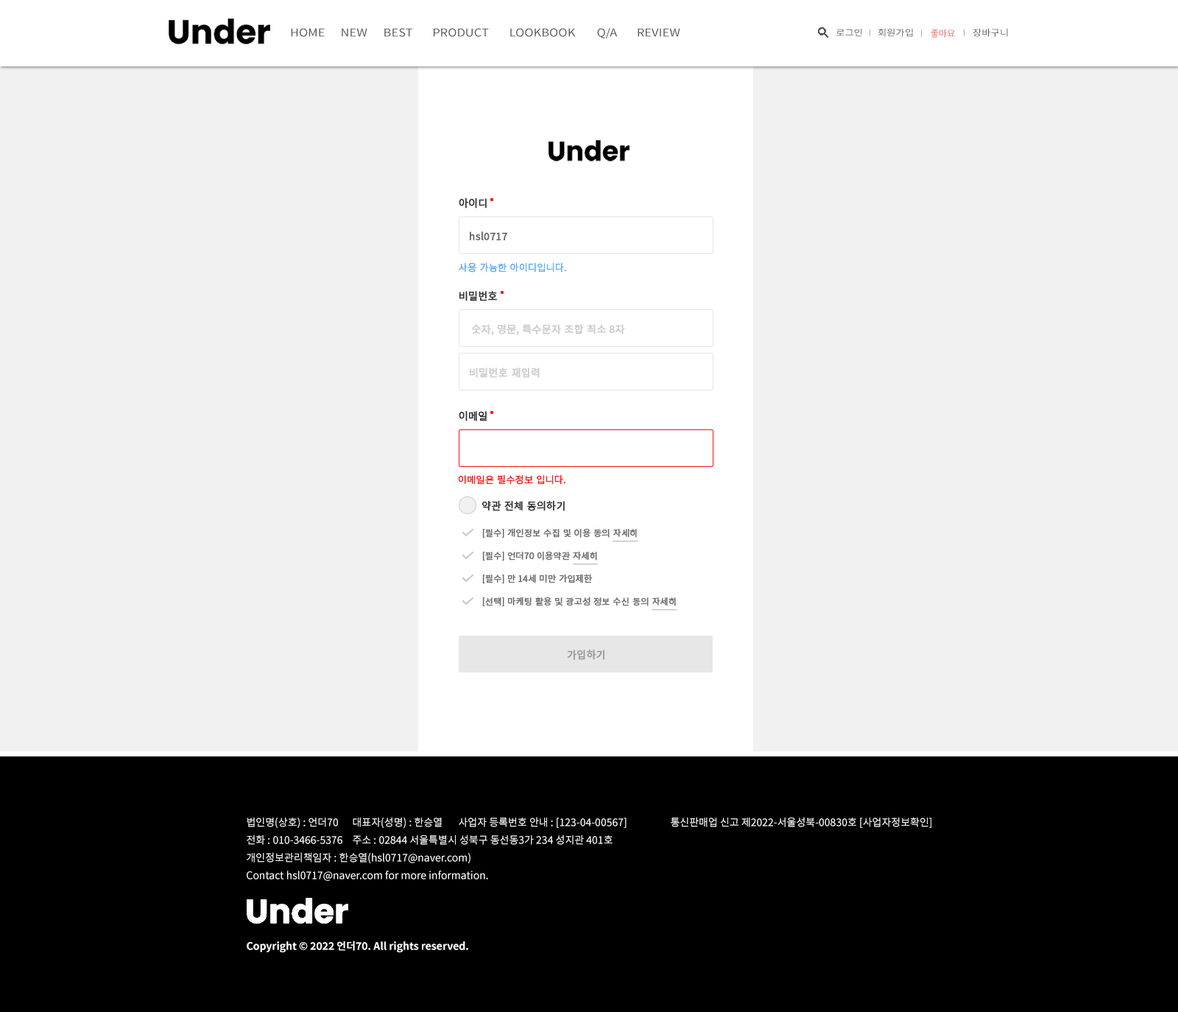
<style>
.page{position:relative;width:1178px;height:1012px;background:#f1f1f1}
.page>*{position:absolute;margin:0}
.t1{font:10.7px "NotoSansKR-Regular";color:#555555;scale:1.14 1}
.t2{font:8.8px "NotoSansKR-Regular";color:#555555;scale:1.11 1}
.t3{font:8.8px "NotoSansKR-Regular";color:#f85656}
.t4{font:10.3px "NotoSansKR-Regular";color:#333333;font-weight:bold}
.t5{font:10.3px "NotoSansKR-Regular";color:#666666;font-weight:bold}
.t6{font:9.6px "NotoSansKR-Light";color:#60aaff;font-weight:bold}
.t7{font:10.3px "NotoSansKR-Regular";color:#cccccc;font-weight:bold}
.t8{font:9.6px "NotoSansKR-Light";color:#ff1010;font-weight:bold}
.t9{font:8.8px "NotoSansKR-Regular";color:#6e6e6e;font-weight:bold}
.t10{font:8.8px "NotoSansKR-Regular";color:#6e6e6e;font-weight:bold;text-decoration:underline}
.t11{font:10.3px "NotoSansKR-Regular";color:#999999;font-weight:bold}
.t12{font:10.3px/17.7px "NotoSansKR-Regular";color:#ffffff}
.t13{font:10.3px/17.7px "NotoSansKR-Bold";color:#ffffff}
</style>
<div class="page">
<p class="t1" style="left:291px;top:28px;width:34px;height:9px">HOME</p>
<p class="t1" style="left:342px;top:28px;width:26px;height:9px">NEW</p>
<p class="t1" style="left:384px;top:28px;width:29px;height:9px">BEST</p>
<p class="t1" style="left:434px;top:28px;width:55px;height:9px">PRODUCT</p>
<p class="t1" style="left:510px;top:28px;width:66px;height:9px">LOOKBOOK</p>
<p class="t1" style="left:597px;top:28px;width:21px;height:11px">Q/A</p>
<p class="t1" style="left:638px;top:28px;width:43px;height:9px">REVIEW</p>
<p class="t2" style="left:837px;top:29px;width:25px;height:8px">로그인</p>
<p class="t2" style="left:878px;top:28px;width:35px;height:9px">회원가입</p>
<p class="t3" style="left:931px;top:29px;width:24px;height:9px">좋아요</p>
<p class="t2" style="left:973px;top:28px;width:35px;height:9px">장바구니</p>
<p class="t4" style="left:459px;top:198px;width:28px;height:10px">아이디</p>
<p class="t5" style="left:470px;top:231px;width:37px;height:10px">hsl0717</p>
<p class="t6" style="left:459px;top:262px;width:107px;height:10px">사용 가능한 아이디입니다.</p>
<p class="t4" style="left:460px;top:291px;width:37px;height:10px">비밀번호</p>
<p class="t7" style="left:471px;top:324px;width:154px;height:11px">숫자, 영문, 특수문자 조합 최소 8자</p>
<p class="t7" style="left:470px;top:368px;width:70px;height:10px">비밀번호 재입력</p>
<p class="t4" style="left:459px;top:411px;width:29px;height:10px">이메일</p>
<p class="t8" style="left:458px;top:475px;width:108px;height:10px">이메일은 필수정보 입니다.</p>
<p class="t4" style="left:482px;top:501px;width:83px;height:10px">약관 전체 동의하기</p>
<p class="t9" style="left:482px;top:528px;width:157px;height:14px">[필수] 개인정보 수집 및 이용 동의 <span class="t10">자세히</span></p>
<p class="t9" style="left:482px;top:551px;width:116px;height:14px">[필수] 언더70 이용약관 <span class="t10">자세히</span></p>
<p class="t9" style="left:482px;top:574px;width:111px;height:10px">[필수] 만 14세 미만 가입제한</p>
<p class="t9" style="left:482px;top:597px;width:196px;height:14px">[선택] 마케팅 활용 및 광고성 정보 수신 동의 <span class="t10">자세히</span></p>
<p class="t11" style="left:567px;top:650px;width:38px;height:10px">가입하기</p>
<p class="t12" style="left:247px;top:817px;width:685px;height:135px">법인명(상호) : 언더70 대표자(성명) : 한승열 사업자 등록번호 안내 : [123-04-00567]  통신판매업 신고 제2022-서울성북-00830호 [사업자정보확인]<br>전화 : 010-3466-5376 주소 : 02844 서울특별시 성북구 동선동3가 234 성지관 401호<br>개인정보관리책임자 : 한승열(hsl0717@naver.com)<br>Contact hsl0717@naver.com for more information.<br><span class="t13"><br><br><br>Copyright © 2022 언더70. All rights reserved.</span></p>
</div>
